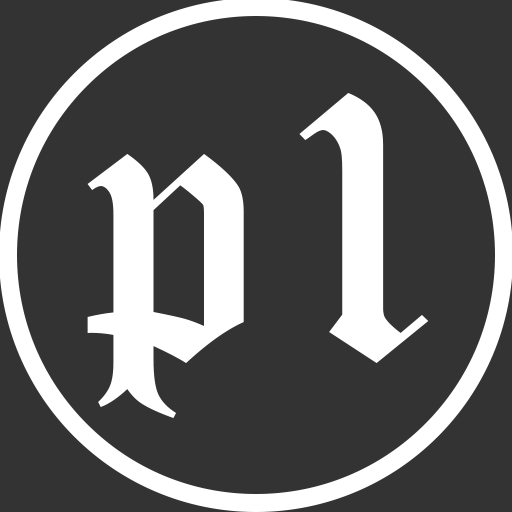
<style>
.page{position:relative;width:512px;height:512px;background:#333333}
.page>*{position:absolute;margin:0}
.t1{font:400px "OldEnglishTextMT";color:#ffffff}
</style>
<div class="page">
<p class="t1" style="left:87px;top:93px;width:342px;height:325px">p1</p>
</div>
